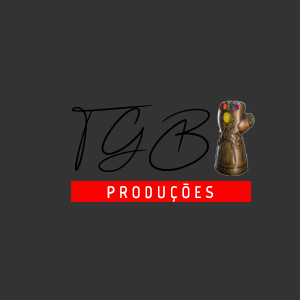
<style>
.page{position:relative;width:300px;height:300px;background:#333333}
.page>*{position:absolute;margin:0}
.t1{font:60.4px "Ariel-Script";letter-spacing:0.025em;color:#000000}
.t2{font:16.7px "Marvel-Bold";letter-spacing:0.025em;color:#ffffff}
</style>
<div class="page">
<p class="t1" style="left:71px;top:105px;width:139px;height:67px">TGB</p>
<p class="t2" style="left:107px;top:183px;width:106px;height:19px">P R O D U Ç Õ E S</p>
</div>
